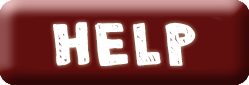
<style>
.page{position:relative;width:249px;height:85px}
.page>*{position:absolute;margin:0}
.t1{font:62.6px "DENNE|Sketchy";letter-spacing:-0.025em;color:#ffffff;scale:1.13 1}
</style>
<div class="page">
<p class="t1" style="left:53px;top:22px;width:143px;height:44px">HELP</p>
</div>
